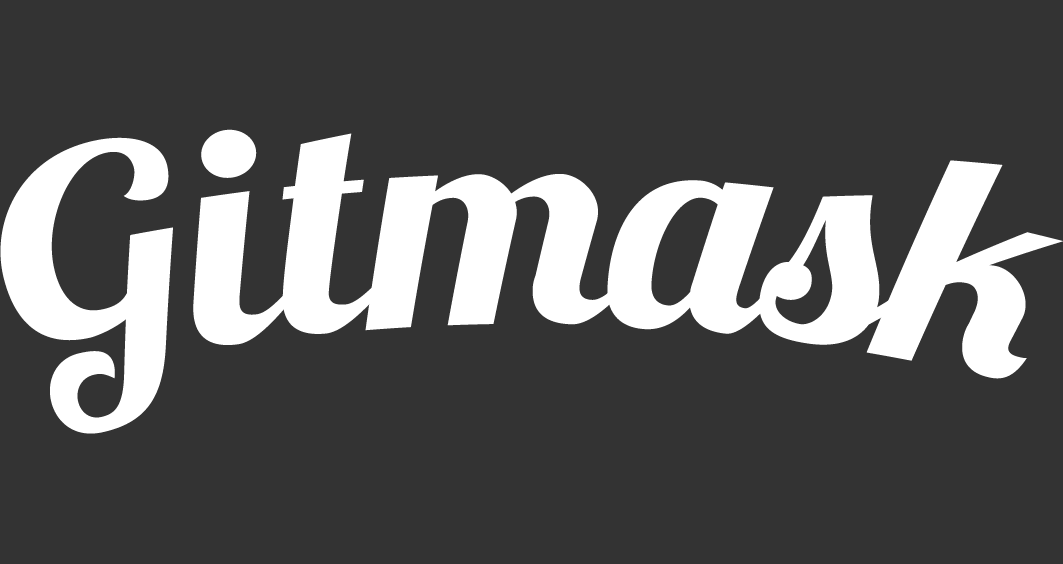
<style>
.page{position:relative;width:1063px;height:564px;background:#333333}
.page>*{position:absolute;margin:0}
.t1{font:300px "Lobster1.3";color:#ffffff}
</style>
<div class="page">
<p class="t1" style="left:0px;top:129px;width:1063px;height:305px">Gitmask</p>
</div>
